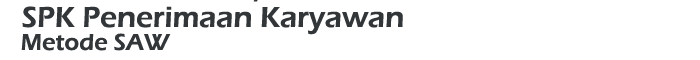
<style>
.page{position:relative;width:700px;height:60px;background:#ffffff}
.page>*{position:absolute;margin:0}
.t1{font:30px "ErasITC-Demi";color:#333638}
.t2{font:24px "ErasITC-Demi";color:#333638}
</style>
<div class="page">
<p class="t1" style="left:22px;top:6px;width:381px;height:29px">SPK Penerimaan Karyawan</p>
<p class="t2" style="left:21px;top:33px;width:150px;height:18px">Metode SAW</p>
</div>
